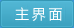
<style>
.page{position:relative;width:74px;height:28px}
.page>*{position:absolute;margin:0}
.t1{font:14px "MicrosoftYaHei";letter-spacing:0.2em;color:#ffffff}
</style>
<div class="page">
<p class="t1" style="left:15px;top:7px;width:47px;height:14px">主界面</p>
</div>
